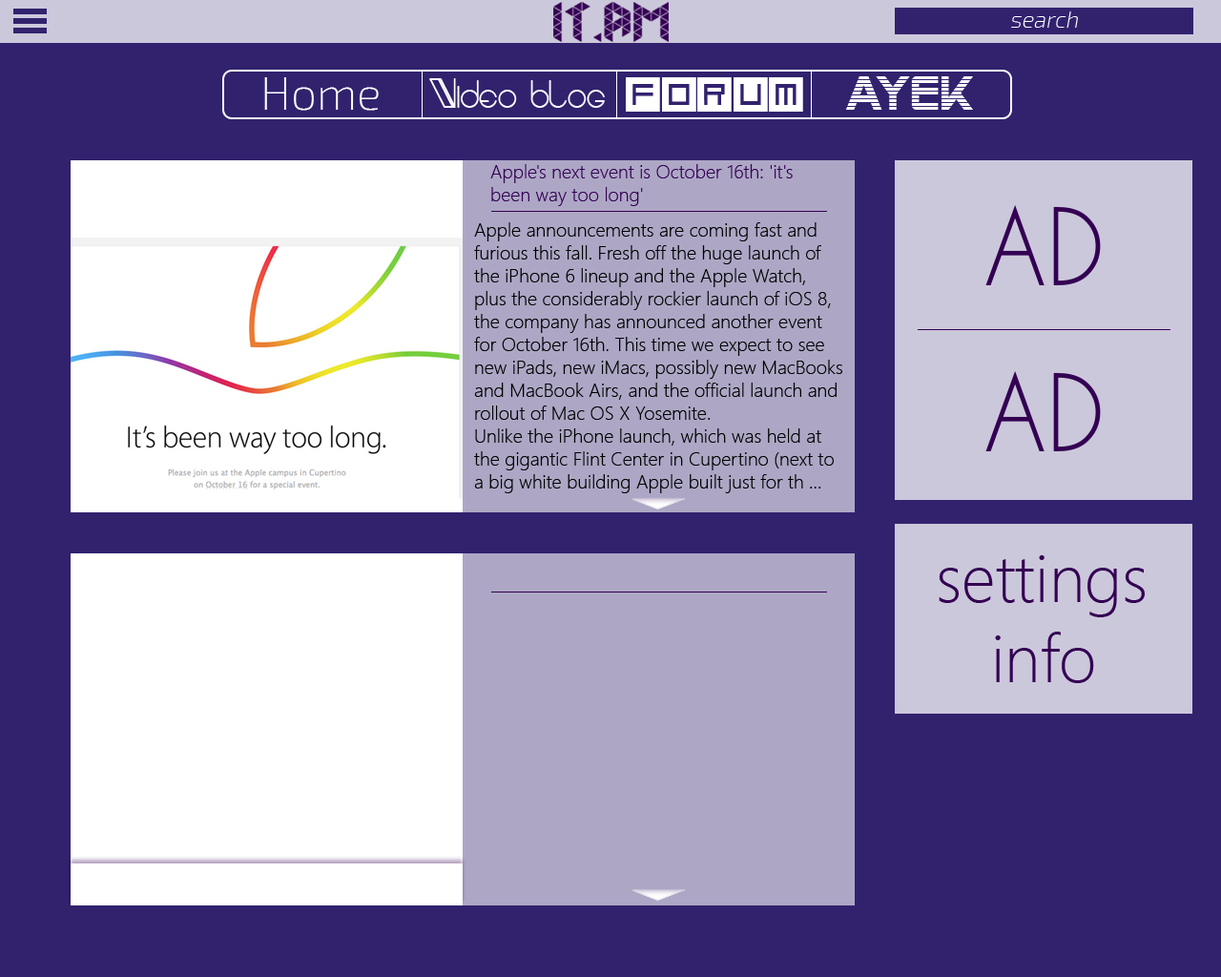
<style>
.page{position:relative;width:1221px;height:977px;background:#32226e}
.page>*{position:absolute;margin:0}
.t1{font:22.9px "Exo2-ExtraLight";color:#ffffff;font-style:italic}
.t2{font:22.9px "Exo2-ExtraLight";color:#ffffff}
.t3{font:45.8px "Exo2-ExtraLight";color:#ffffff}
.t4{font:52.5px "Qubix";color:#ffffff}
.t5{font:47.7px "SFAlienEncounters";color:#ffffff}
.t6{font:57.2px "AracmeWaroundLight";color:#ffffff}
.t7{font:19.1px "SegoeUI-Light";color:#340053}
.t8{font:100.2px "CaviarDreams";color:#340053}
.t9{font:100.2px "Sylfaen";color:#340053}
.t10{font:19.1px "SegoeUI-Light";color:#000000}
.t11{font:100.2px "Sylfaen";color:#000000}
.t12{font:66.8px "SegoeUI-Light";color:#340053}
</style>
<div class="page">
<p class="t1" style="left:1011px;top:11px;width:67px;height:17px"><span class="t2">                      </span>search</p>
<p class="t3" style="left:264px;top:77px;width:115px;height:34px">Home</p>
<p class="t4" style="left:626px;top:77px;width:177px;height:35px">Forum</p>
<p class="t5" style="left:845px;top:76px;width:128px;height:34px">ayek</p>
<p class="t6" style="left:429px;top:78px;width:176px;height:30px">Video blog</p>
<p class="t7" style="left:490px;top:164px;width:303px;height:42px">Apple's next event is October 16th: 'it's been way too long'</p>
<p class="t8" style="left:985px;top:205px;width:116px;height:80px"><span class="t9">  </span>AD</p>
<p class="t10" style="left:474px;top:222px;width:368px;height:271px">Apple announcements are coming fast and furious this fall. Fresh off the huge launch of the iPhone 6 lineup and the Apple Watch, plus the considerably rockier launch of iOS 8, the company has announced another event for October 16th. This time we expect to see new iPads, new iMacs, possibly new MacBooks and MacBook Airs, and the official launch and rollout of Mac OS X Yosemite.<br>Unlike the iPhone launch, which was held at the gigantic Flint Center in Cupertino (next to a big white building Apple built just for th ...</p>
<p class="t8" style="left:985px;top:371px;width:116px;height:80px"><span class="t11">  </span>AD</p>
<p class="t12" style="left:939px;top:555px;width:206px;height:128px">settings<br>    info</p>
</div>
